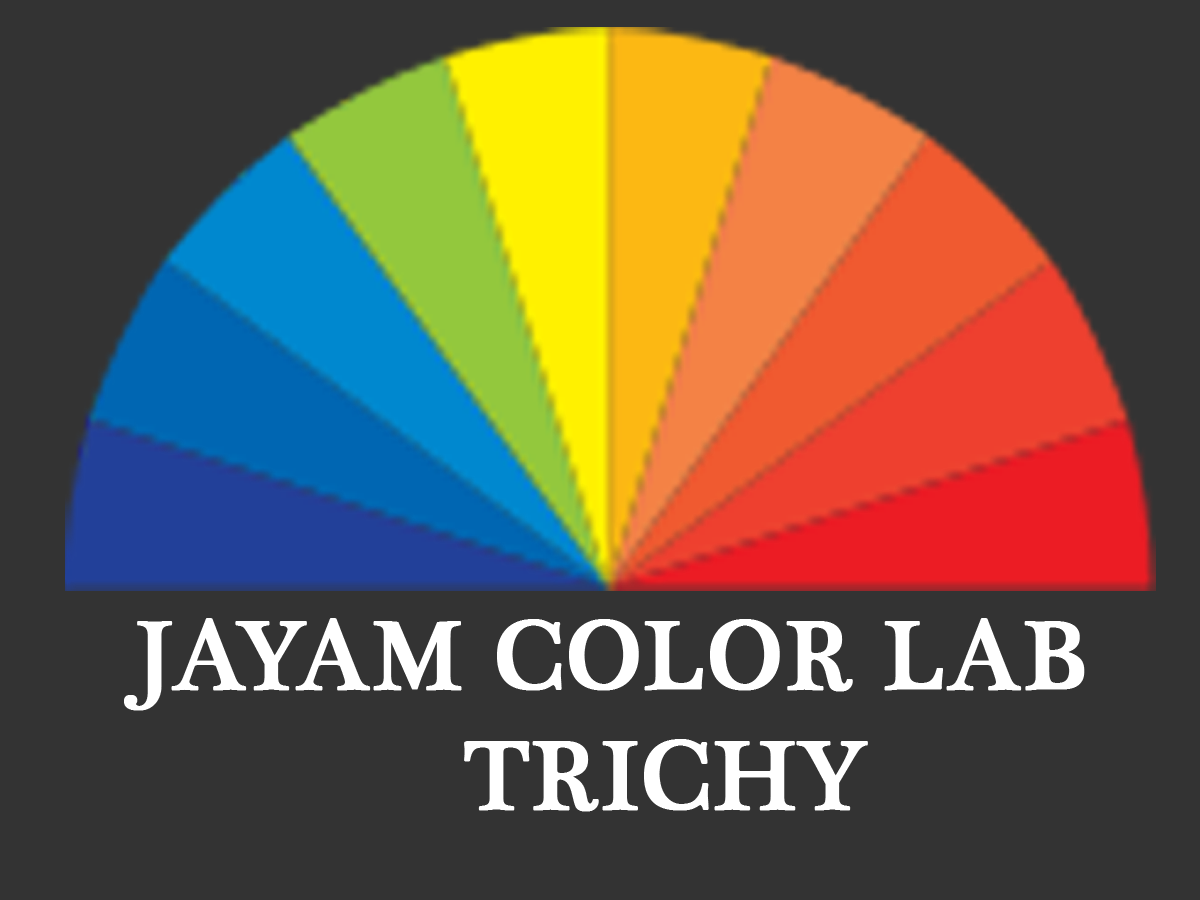
<style>
.page{position:relative;width:1200px;height:900px;background:#333333}
.page>*{position:absolute;margin:0}
.t1{font:100px "PlantagenetCherokee";color:#ffffff;font-weight:bold}
</style>
<div class="page">
<p class="t1" style="left:124px;top:618px;width:961px;height:194px;text-align:center">JAYAM COLOR LAB<br>   TRICHY</p>
</div>
